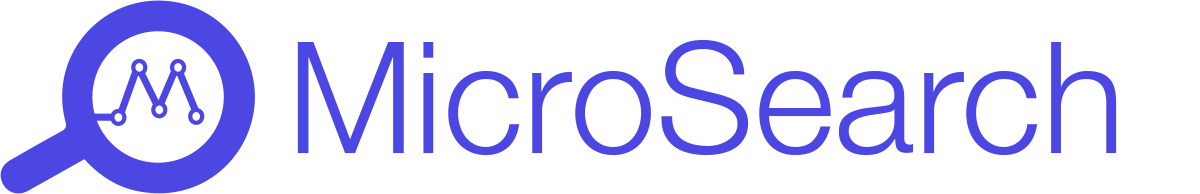
<style>
.page{position:relative;width:1200px;height:194px;background:#ffffff}
.page>*{position:absolute;margin:0}
.t1{font:155.3px "HelveticaNeue-Light";color:#4c47e2}
</style>
<div class="page">
<p class="t1" style="left:297px;top:40px;width:820px;height:115px">MicroSearch</p>
</div>
